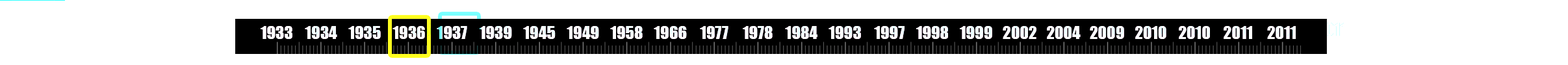
<style>
.page{position:relative;width:1568px;height:65px;background:#ffffff}
.page>*{position:absolute;margin:0}
.t1{font:16.4px "Impact"}
</style>
<div class="page">
<p class="t1" style="left:261px;top:23px;width:1035px;height:13px">1933 1934 1935 1936 1937 1939 1945 1949 1958 1966 1977 1978 1984 1993 1997 1998 1999 2002 2004 2009 2010 2010 2011 2011</p>
<p class="t1" style="left:261px;top:23px;width:1035px;height:13px">1933 1934 1935 1936 1937 1939 1945 1949 1958 1966 1977 1978 1984 1993 1997 1998 1999 2002 2004 2009 2010 2010 2011 2011</p>
</div>
